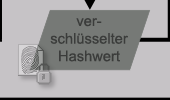
<style>
.page{position:relative;width:170px;height:100px;background:#c6c3c6}
.page>*{position:absolute;margin:0}
.t1{font:14.7px "ArialMT";color:#3b3c3b}
</style>
<div class="page">
<p class="t1" style="left:50px;top:18px;width:78px;height:44px;text-align:center">ver-<br>schlüsselter<br>Hashwert</p>
</div>
